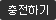
<style>
.page{position:relative;width:56px;height:20px;background:#303030}
.page>*{position:absolute;margin:0}
.t1{font:12px "morris9";color:#ffffff}
</style>
<div class="page">
<p class="t1" style="left:8px;top:5px;width:40px;height:10px">충전하기</p>
</div>
